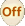
<style>
.page{position:relative;width:25px;height:26px}
.page>*{position:absolute;margin:0}
.t1{font:12.7px "LaoUI-Bold";color:#b34f00}
</style>
<div class="page">
<p class="t1" style="left:2px;top:6px;width:20px;height:11px">Off</p>
</div>
